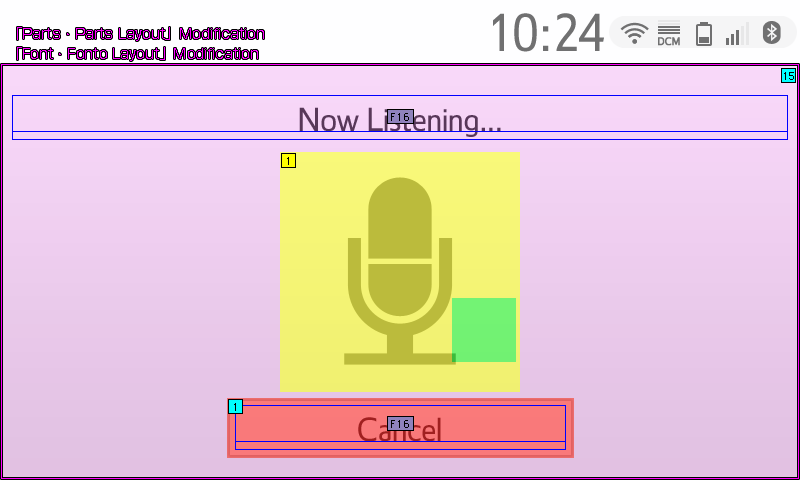
<style>
.page{position:relative;width:800px;height:480px}
.page>*{position:absolute;margin:0}
.t1{font:48px "Tfont1502_T2S";letter-spacing:0.05em;color:#707071}
.t2{font:14px/20px "ShinGoPro-Regular";color:#ff00ff}
.t3{font:30px "Tfont1507a_T1S";color:#583859}
.t4{font:30px "Tfont1507a_T1S";color:#a02020}
</style>
<div class="page">
<p class="t1" style="left:493px;top:13px;width:111px;height:39px">10:24</p>
<p class="t2" style="left:17px;top:27px;width:247px;height:34px">「Parts・Parts Layout」Modification<br>「Font・Fonto Layout」Modification</p>
<p class="t3" style="left:299px;top:107px;width:202px;height:30px">Now Listening...</p>
<p class="t4" style="left:358px;top:417px;width:83px;height:25px">Cancel</p>
</div>
